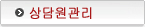
<style>
.page{position:relative;width:145px;height:27px}
.page>*{position:absolute;margin:0}
.t1{font:14px "GulimChe";color:#a81818;text-transform:uppercase;font-weight:bold;scale:0.9 1}
</style>
<div class="page">
<p class="t1" style="left:29px;top:7px;width:63px;height:12px">상담원관리</p>
</div>
